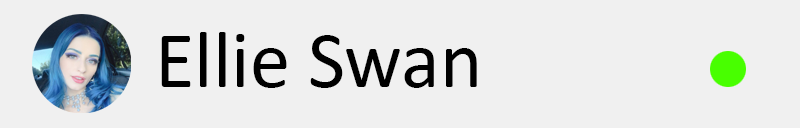
<style>
.page{position:relative;width:800px;height:128px;background:#f0f0f0}
.page>*{position:absolute;margin:0}
.t1{font:80.5px "Calibri";color:#000000}
</style>
<div class="page">
<p class="t1" style="left:161px;top:32px;width:316px;height:56px">Ellie Swan</p>
</div>
